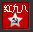
<style>
.page{position:relative;width:33px;height:32px;background:#c50000}
.page>*{position:absolute;margin:0}
.t1{font:10.4px "SimSun";letter-spacing:-0.25em;color:#ffffff}
</style>
<div class="page">
<p class="t1" style="left:4px;top:4px;width:24px;height:9px">红九八</p>
</div>
